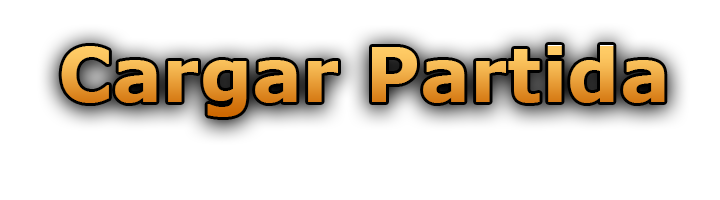
<style>
.page{position:relative;width:720px;height:200px;background:#ffffff}
.page>*{position:absolute;margin:0}
.t1{font:75px "Verdana-Bold"}
</style>
<div class="page">
<p class="t1" style="left:61px;top:45px;width:604px;height:72px">Cargar Partida</p>
</div>
